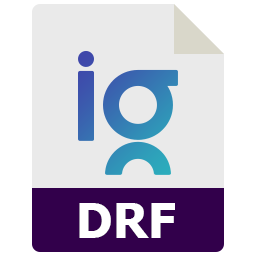
<style>
.page{position:relative;width:256px;height:256px;background:#eaeaea}
.page>*{position:absolute;margin:0}
.t1{font:48px "Tahoma-Bold";color:#ffffff}
</style>
<div class="page">
<p class="t1" style="left:79px;top:203px;width:96px;height:35px">DRF</p>
</div>
